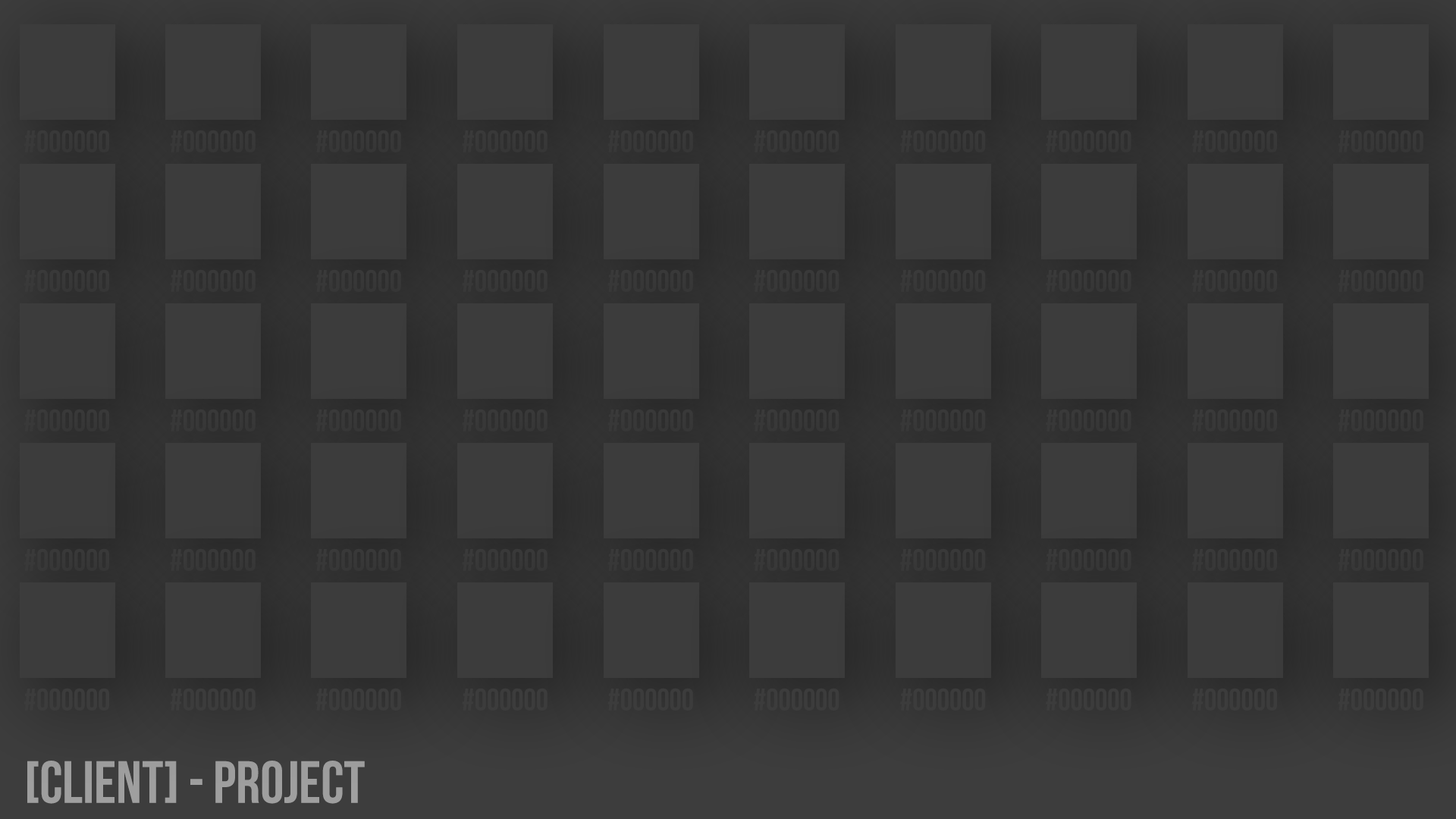
<style>
.page{position:relative;width:1456px;height:819px;background:#3c3c3c}
.page>*{position:absolute;margin:0}
.t1{font:31.2px "BebasNeue";color:#3c3c3c;text-transform:uppercase}
.t2{font:59.7px "BebasNeue";color:#a0a0a0;text-transform:uppercase}
</style>
<div class="page">
<p class="t1" style="left:24px;top:130px;width:85px;height:22px">#000000</p>
<p class="t1" style="left:170px;top:130px;width:86px;height:22px">#000000</p>
<p class="t1" style="left:315px;top:130px;width:86px;height:22px">#000000</p>
<p class="t1" style="left:462px;top:130px;width:86px;height:22px">#000000</p>
<p class="t1" style="left:607px;top:130px;width:86px;height:22px">#000000</p>
<p class="t1" style="left:754px;top:130px;width:85px;height:22px">#000000</p>
<p class="t1" style="left:900px;top:130px;width:86px;height:22px">#000000</p>
<p class="t1" style="left:1046px;top:130px;width:85px;height:22px">#000000</p>
<p class="t1" style="left:1191px;top:130px;width:86px;height:22px">#000000</p>
<p class="t1" style="left:1338px;top:130px;width:85px;height:22px">#000000</p>
<p class="t1" style="left:24px;top:269px;width:85px;height:23px">#000000</p>
<p class="t1" style="left:170px;top:269px;width:86px;height:23px">#000000</p>
<p class="t1" style="left:315px;top:269px;width:86px;height:23px">#000000</p>
<p class="t1" style="left:462px;top:269px;width:86px;height:23px">#000000</p>
<p class="t1" style="left:607px;top:269px;width:86px;height:23px">#000000</p>
<p class="t1" style="left:754px;top:269px;width:85px;height:23px">#000000</p>
<p class="t1" style="left:900px;top:269px;width:86px;height:23px">#000000</p>
<p class="t1" style="left:1046px;top:269px;width:85px;height:23px">#000000</p>
<p class="t1" style="left:1191px;top:269px;width:86px;height:23px">#000000</p>
<p class="t1" style="left:1338px;top:269px;width:85px;height:23px">#000000</p>
<p class="t1" style="left:24px;top:409px;width:85px;height:22px">#000000</p>
<p class="t1" style="left:170px;top:409px;width:86px;height:22px">#000000</p>
<p class="t1" style="left:315px;top:409px;width:86px;height:22px">#000000</p>
<p class="t1" style="left:462px;top:409px;width:86px;height:22px">#000000</p>
<p class="t1" style="left:607px;top:409px;width:86px;height:22px">#000000</p>
<p class="t1" style="left:754px;top:409px;width:85px;height:22px">#000000</p>
<p class="t1" style="left:900px;top:409px;width:86px;height:22px">#000000</p>
<p class="t1" style="left:1046px;top:409px;width:85px;height:22px">#000000</p>
<p class="t1" style="left:1191px;top:409px;width:86px;height:22px">#000000</p>
<p class="t1" style="left:1338px;top:409px;width:85px;height:22px">#000000</p>
<p class="t1" style="left:24px;top:548px;width:85px;height:23px">#000000</p>
<p class="t1" style="left:170px;top:548px;width:86px;height:23px">#000000</p>
<p class="t1" style="left:315px;top:548px;width:86px;height:23px">#000000</p>
<p class="t1" style="left:462px;top:548px;width:86px;height:23px">#000000</p>
<p class="t1" style="left:607px;top:548px;width:86px;height:23px">#000000</p>
<p class="t1" style="left:754px;top:548px;width:85px;height:23px">#000000</p>
<p class="t1" style="left:900px;top:548px;width:86px;height:23px">#000000</p>
<p class="t1" style="left:1046px;top:548px;width:85px;height:23px">#000000</p>
<p class="t1" style="left:1191px;top:548px;width:86px;height:23px">#000000</p>
<p class="t1" style="left:1338px;top:548px;width:85px;height:23px">#000000</p>
<p class="t1" style="left:24px;top:688px;width:85px;height:23px">#000000</p>
<p class="t1" style="left:170px;top:688px;width:86px;height:23px">#000000</p>
<p class="t1" style="left:315px;top:688px;width:86px;height:23px">#000000</p>
<p class="t1" style="left:462px;top:688px;width:86px;height:23px">#000000</p>
<p class="t1" style="left:607px;top:688px;width:86px;height:23px">#000000</p>
<p class="t1" style="left:754px;top:688px;width:85px;height:23px">#000000</p>
<p class="t1" style="left:900px;top:688px;width:86px;height:23px">#000000</p>
<p class="t1" style="left:1046px;top:688px;width:85px;height:23px">#000000</p>
<p class="t1" style="left:1191px;top:688px;width:86px;height:23px">#000000</p>
<p class="t1" style="left:1338px;top:688px;width:85px;height:23px">#000000</p>
<p class="t2" style="left:27px;top:761px;width:338px;height:43px">[Client] - Project</p>
</div>
